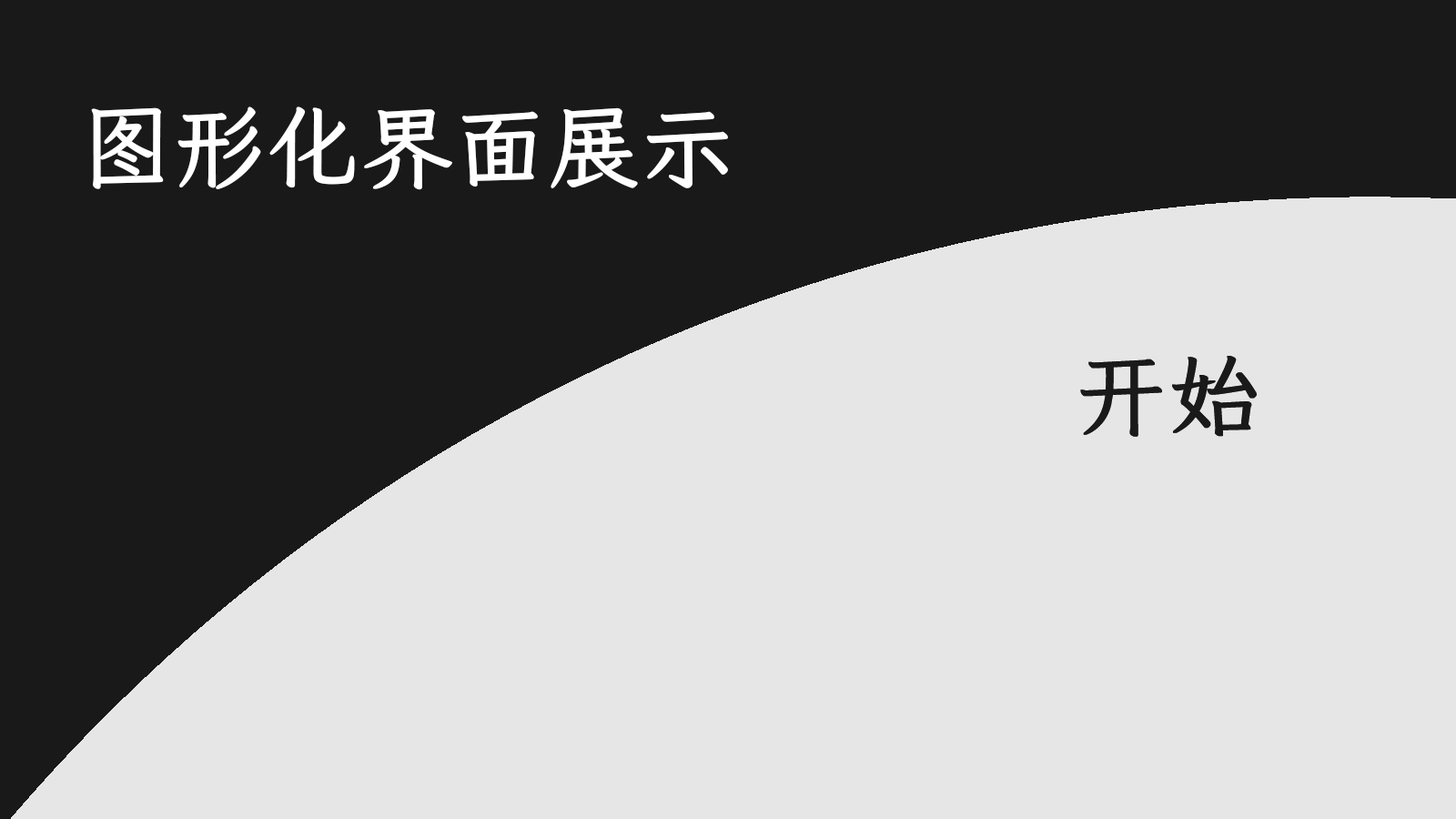
<style>
.page{position:relative;width:1456px;height:819px;background:#e6e6e6}
.page>*{position:absolute;margin:0}
.t1{font:91.1px "LXGWWenKaiLite-Light";color:#ffffff;font-weight:bold}
.t2{font:91px "LXGWWenKaiLite-Light";color:#1a1a1a;font-weight:bold}
</style>
<div class="page">
<p class="t1" style="left:91px;top:106px;width:637px;height:84px">图形化界面展示</p>
<p class="t2" style="left:1080px;top:356px;width:177px;height:81px">开始</p>
<p class="t2" style="left:1080px;top:356px;width:177px;height:81px">开始</p>
</div>
